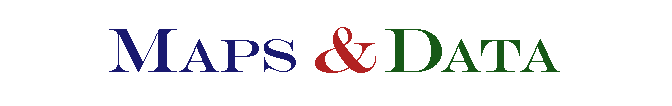
<style>
.page{position:relative;width:672px;height:106px;background:#ffffff}
.page>*{position:absolute;margin:0}
.t1{font:47.8px "EngraversMT";color:#191970}
.t2{font:63.8px "EngraversMT";color:#191970}
.t3{font:63.8px "EngraversMT";color:#b22222}
.t4{font:63.8px "EngraversMT";color:#175917}
.t5{font:47.8px "EngraversMT";color:#175917}
</style>
<div class="page">
<p class="t1" style="left:109px;top:27px;width:267px;height:46px"><span class="t2">M</span>aps <span class="t3">&amp;</span></p>
<p class="t4" style="left:385px;top:29px;width:57px;height:43px">D</p>
<p class="t5" style="left:441px;top:39px;width:119px;height:33px">Ata</p>
</div>
